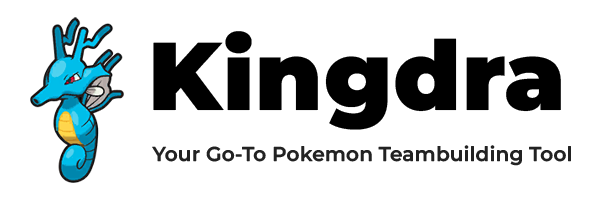
<style>
.page{position:relative;width:600px;height:199px;background:#ffffff}
.page>*{position:absolute;margin:0}
.t1{font:96px "MontserratRoman-Black";letter-spacing:0.01em;color:#000000}
.t2{font:20px "MontserratRoman-SemiBold";letter-spacing:0.01em;color:#222222}
</style>
<div class="page">
<p class="t1" style="left:153px;top:31px;width:408px;height:99px">Kingdra</p>
<p class="t2" style="left:152px;top:145px;width:419px;height:21px">Your Go-To Pokemon Teambuilding Tool</p>
</div>
